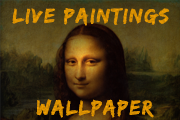
<style>
.page{position:relative;width:180px;height:120px}
.page>*{position:absolute;margin:0}
.t1{font:21.3px/7.1px "EdoSZ";letter-spacing:0.075em;color:#dc9201}
</style>
<div class="page">
<p class="t1" style="left:12px;top:7px;width:158px;height:111px;text-align:center">Live Paintings <br><br><br><br><br><br><br><br><br><br><br><br><br>WALLPAPER</p>
</div>
